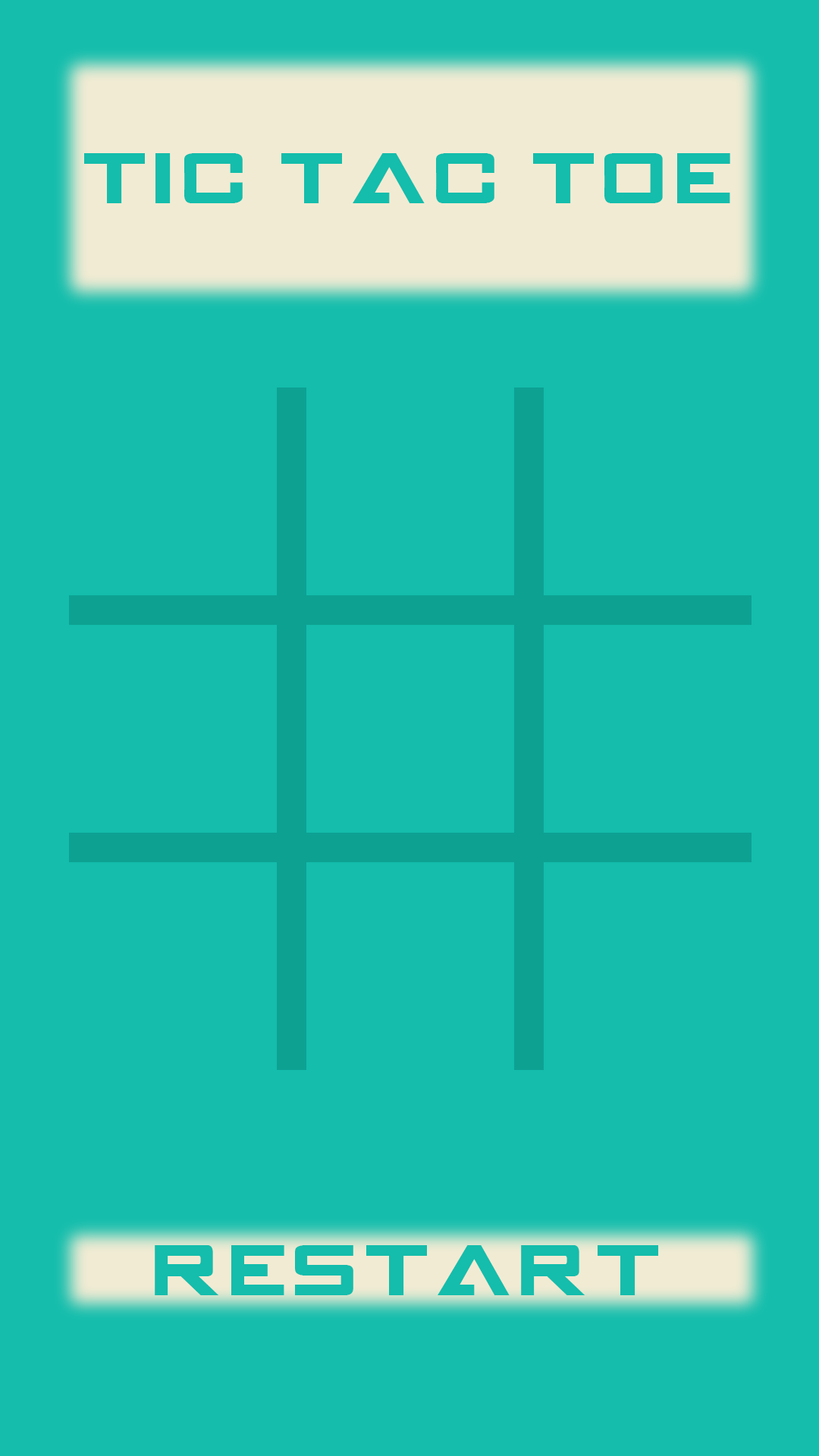
<style>
.page{position:relative;width:819px;height:1456px;background:#14bdac}
.page>*{position:absolute;margin:0}
.t1{font:62.2px "GAMECUBENDualSet";color:#14bdac}
</style>
<div class="page">
<p class="t1" style="left:84px;top:153px;width:646px;height:50px">TIC TAC TOE</p>
<p class="t1" style="left:155px;top:1245px;width:503px;height:50px">RESTART</p>
</div>
